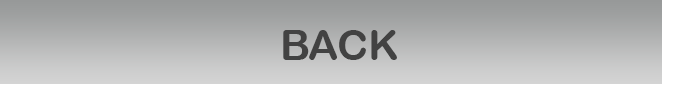
<style>
.page{position:relative;width:680px;height:90px}
.page>*{position:absolute;margin:0}
.t1{font:41.7px "ArialRoundedMTBold";color:#424242}
</style>
<div class="page">
<p class="t1" style="left:283px;top:30px;width:114px;height:30px">BACK</p>
</div>
